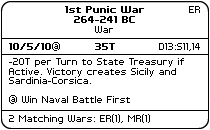
<style>
.page{position:relative;width:210px;height:130px;background:#ffffff}
.page>*{position:absolute;margin:0}
.t1{font:8px "PFTempestaSeven-Bold";color:#000000}
.t2{font:8px "PFTempestaSeven";color:#000000}
.t3{font:8px "PFTempestaSeven";color:#010101}
</style>
<div class="page">
<p class="t1" style="left:65px;top:6px;width:79px;height:17px;text-align:center">1st Punic War<br>264-241 BC</p>
<p class="t2" style="left:189px;top:6px;width:11px;height:7px">ER</p>
<p class="t2" style="left:95px;top:26px;width:18px;height:7px">War</p>
<p class="t1" style="left:9px;top:42px;width:51px;height:9px">10/5/10@</p>
<p class="t1" style="left:95px;top:43px;width:20px;height:7px">35T</p>
<p class="t3" style="left:159px;top:43px;width:41px;height:8px">D13:S11,14</p>
<p class="t2" style="left:9px;top:58px;width:175px;height:46px">-20T per Turn to State Treasury if<br>Active. Victory creates Sicily and<br>Sardinia-Corsica.<br><br>@ Win Naval Battle First</p>
<p class="t2" style="left:9px;top:114px;width:141px;height:10px">2 Matching Wars: ER(1), MR(1)</p>
</div>
